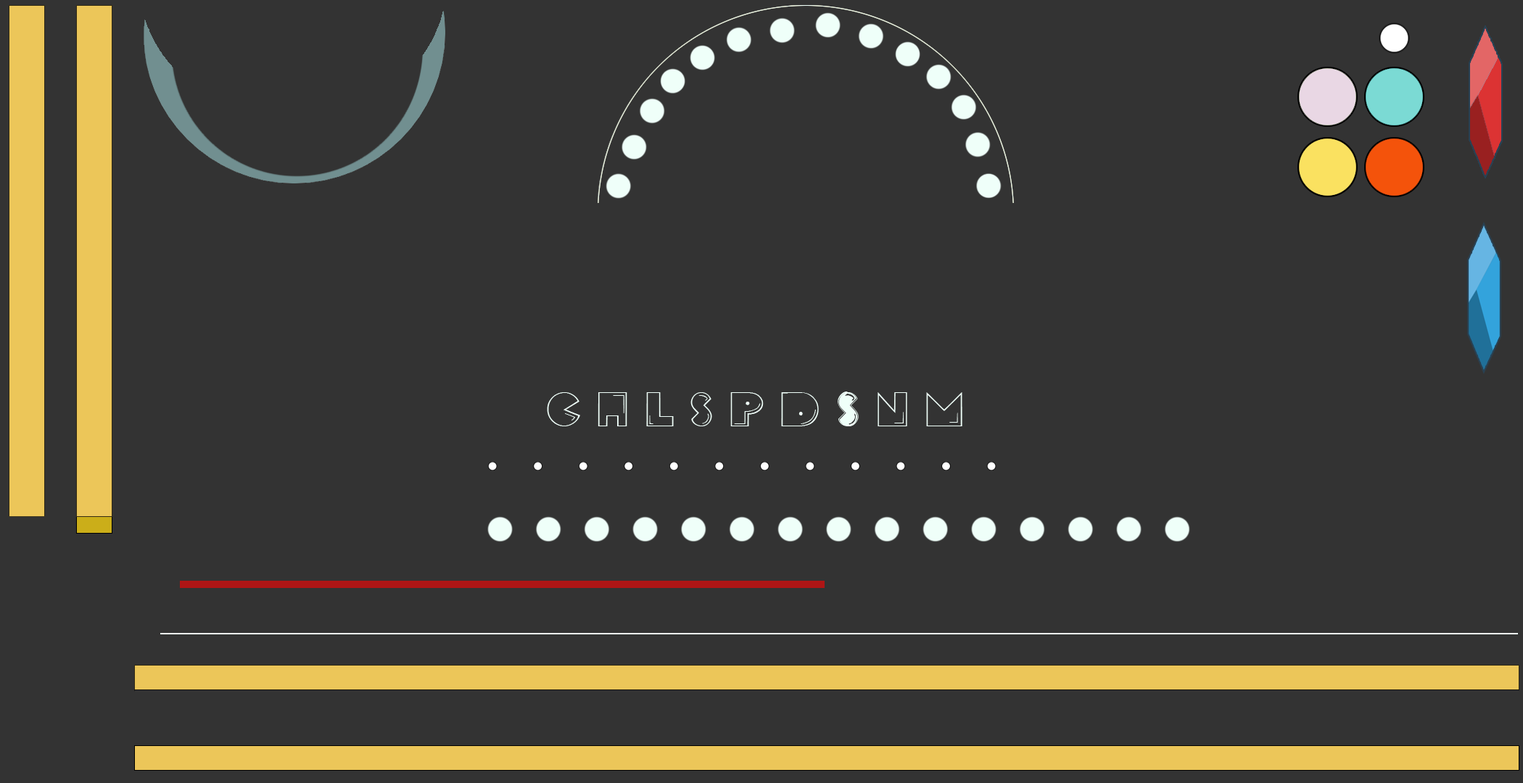
<style>
.page{position:relative;width:1523px;height:783px;background:#333333}
.page>*{position:absolute;margin:0}
.t1{font:34.8px "PacFont";color:#effff9}
</style>
<div class="page">
<p class="t1" style="left:547px;top:392px;width:415px;height:34px">C H L S P D s N M</p>
</div>
